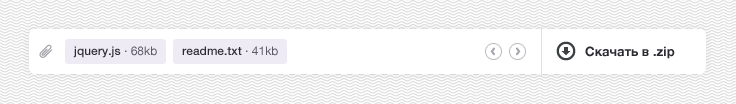
<style>
.page{position:relative;width:736px;height:104px;background:#ffffff}
.page>*{position:absolute;margin:0}
.t1{font:12px "HelveticaNeue-Medium";color:#2d2b33}
.t2{font:12px "HelveticaNeue";color:#5d5a65}
.t3{font:13px "HelveticaNeue-Bold";color:#2d2b32}
</style>
<div class="page">
<p class="t1" style="left:73px;top:46px;width:84px;height:12px">jquery.js <span class="t2">· 68kb</span></p>
<p class="t1" style="left:182px;top:46px;width:96px;height:10px">readme.txt <span class="t2">· 41kb</span></p>
<p class="t3" style="left:585px;top:46px;width:90px;height:13px">Скачать в .zip</p>
</div>
